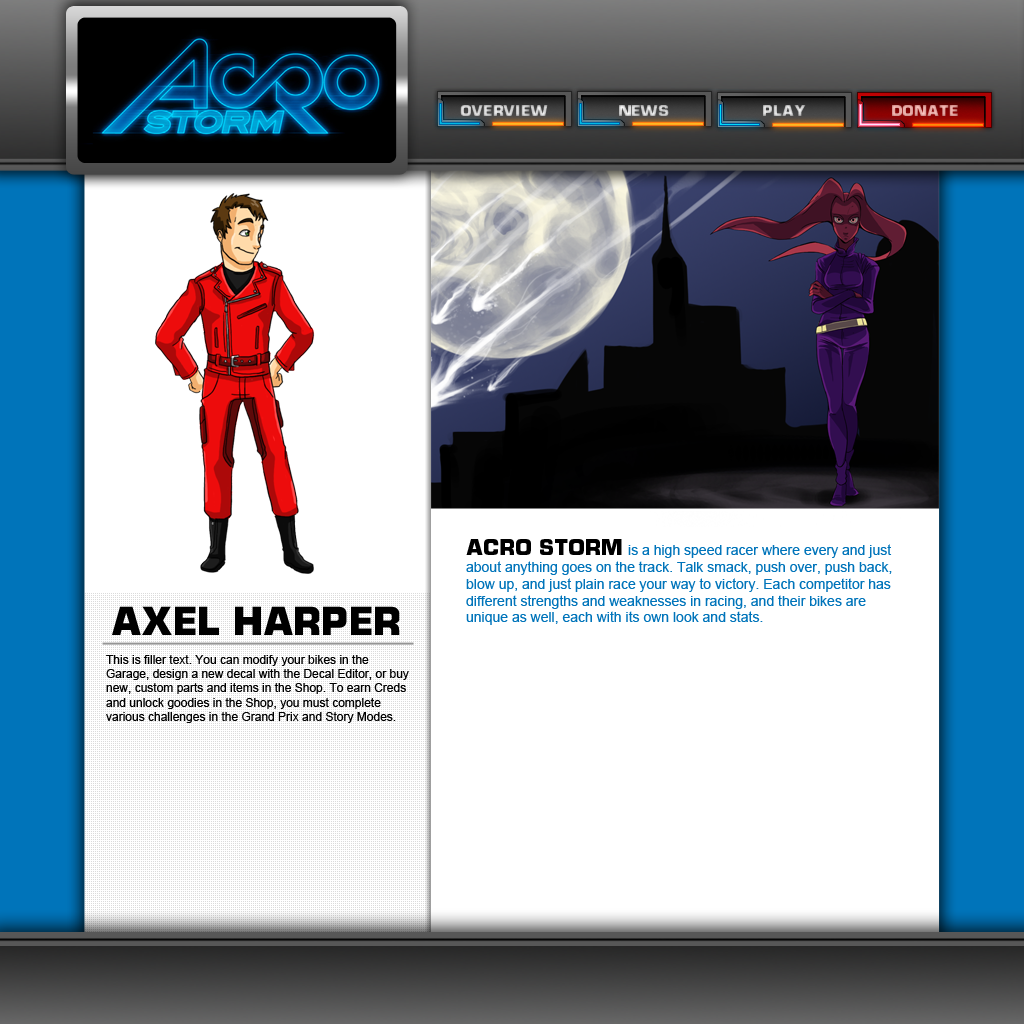
<style>
.page{position:relative;width:1024px;height:1024px;background:#ffffff}
.page>*{position:absolute;margin:0}
.t1{font:14px "MicroTechnicBold"}
.t2{font:14px "MicroTechnicBold";color:#e1a39e}
.t3{font:14px "ArialMT";color:#0074ba}
.t4{font:20px "MicroTechnicBold";color:#000000}
.t5{font:36px "MicroTechnicBold";color:#000000}
.t6{font:12px "ArialMT";color:#000000}
</style>
<div class="page">
<p class="t1" style="left:460px;top:105px;width:88px;height:11px">Overview</p>
<p class="t1" style="left:619px;top:105px;width:50px;height:11px">News</p>
<p class="t1" style="left:763px;top:105px;width:43px;height:11px">Play</p>
<p class="t2" style="left:892px;top:105px;width:66px;height:11px">Donate</p>
<p class="t3" style="left:466px;top:539px;width:426px;height:86px"><span class="t4">ACRO STORM </span>is a high speed racer where every and just about anything goes on the track. Talk smack, push over, push back, blow up, and just plain race your way to victory. Each competitor has different strengths and weaknesses in racing, and their bikes are unique as well, each with its own look and stats.</p>
<p class="t5" style="left:112px;top:606px;width:288px;height:29px">Axel Harper</p>
<p class="t6" style="left:106px;top:655px;width:303px;height:68px">This is filler text. You can modify your bikes in the Garage, design a new decal with the Decal Editor, or buy new, custom parts and items in the Shop. To earn Creds and unlock goodies in the Shop, you must complete various challenges in the Grand Prix and Story Modes.</p>
</div>
